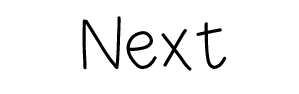
<style>
.page{position:relative;width:299px;height:94px;background:#ffffff}
.page>*{position:absolute;margin:0}
.t1{font:80px "RiseStarHand";color:#000000}
</style>
<div class="page">
<p class="t1" style="left:82px;top:16px;width:145px;height:55px">Next</p>
</div>
